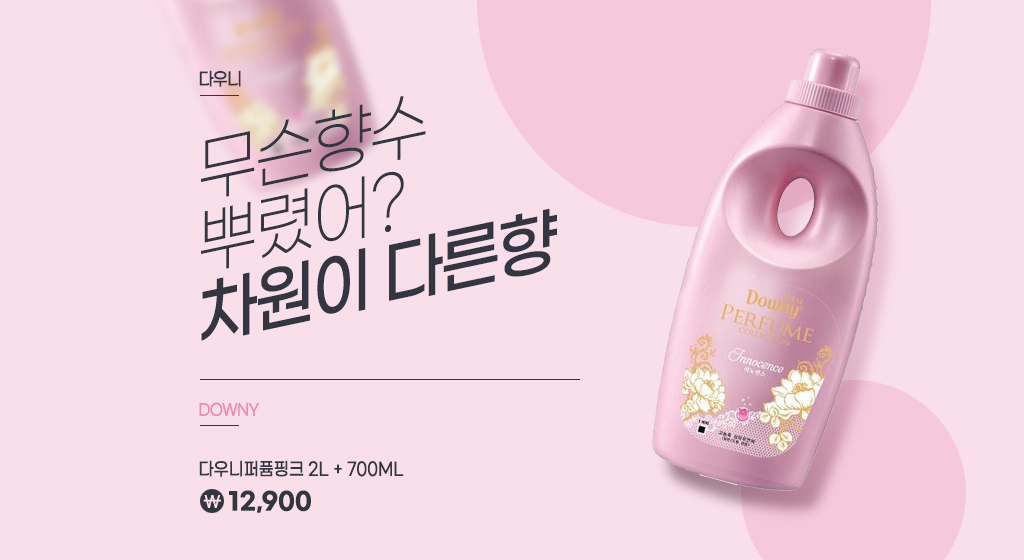
<style>
.page{position:relative;width:1024px;height:560px;background:#f9dfea}
.page>*{position:absolute;margin:0}
.t1{font:18px "GmarketSansMedium";letter-spacing:-0.05em;color:#333640;scale:0.87 1}
.t2{font:72px/72px "GmarketSansLight";letter-spacing:-0.05em;color:#333640;scale:0.89 1}
.t3{font:72px/72px "GmarketSansMedium";letter-spacing:-0.05em;color:#333640;scale:0.89 1}
.t4{font:16px "GmarketSansMedium";letter-spacing:-0.05em;color:#f08ab2;scale:0.87 1}
.t5{font:18px "GmarketSansMedium";color:#333640;scale:0.87 1}
.t6{font:16px "GmarketSansMedium";color:#f9dfea}
.t7{font:24px "GmarketSansBold";color:#333640}
</style>
<div class="page">
<p class="t1" style="left:199px;top:70px;width:42px;height:17px">다우니</p>
<p class="t2" style="left:201px;top:96px;width:356px;height:245px;rotate:-12deg">무슨향수<br>뿌렸어?<br><span class="t3">차원이 다른향</span></p>
<p class="t4" style="left:199px;top:402px;width:61px;height:15px">DOWNY</p>
<p class="t5" style="left:199px;top:460px;width:205px;height:17px">다우니퍼퓸핑크 2L + 700ML</p>
<p class="t6" style="left:203px;top:495px;width:18px;height:13px">\</p>
<p class="t7" style="left:229px;top:490px;width:82px;height:23px">12,900</p>
</div>
